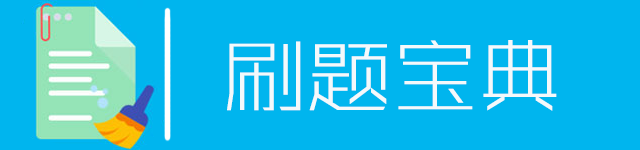
<style>
.page{position:relative;width:640px;height:150px;background:#00b5ee}
.page>*{position:absolute;margin:0}
.t1{font:85px "RuiXian";color:#f4f9fb}
</style>
<div class="page">
<p class="t1" style="left:227px;top:40px;width:330px;height:71px">刷题宝典</p>
</div>
